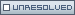
<style>
.page{position:relative;width:75px;height:15px;background:#dce4ec}
.page>*{position:absolute;margin:0}
.t1{font:8px "BitDustTwo";color:#4c617e}
</style>
<div class="page">
<p class="t1" style="left:13px;top:5px;width:59px;height:5px">UNRESOLVED</p>
</div>
